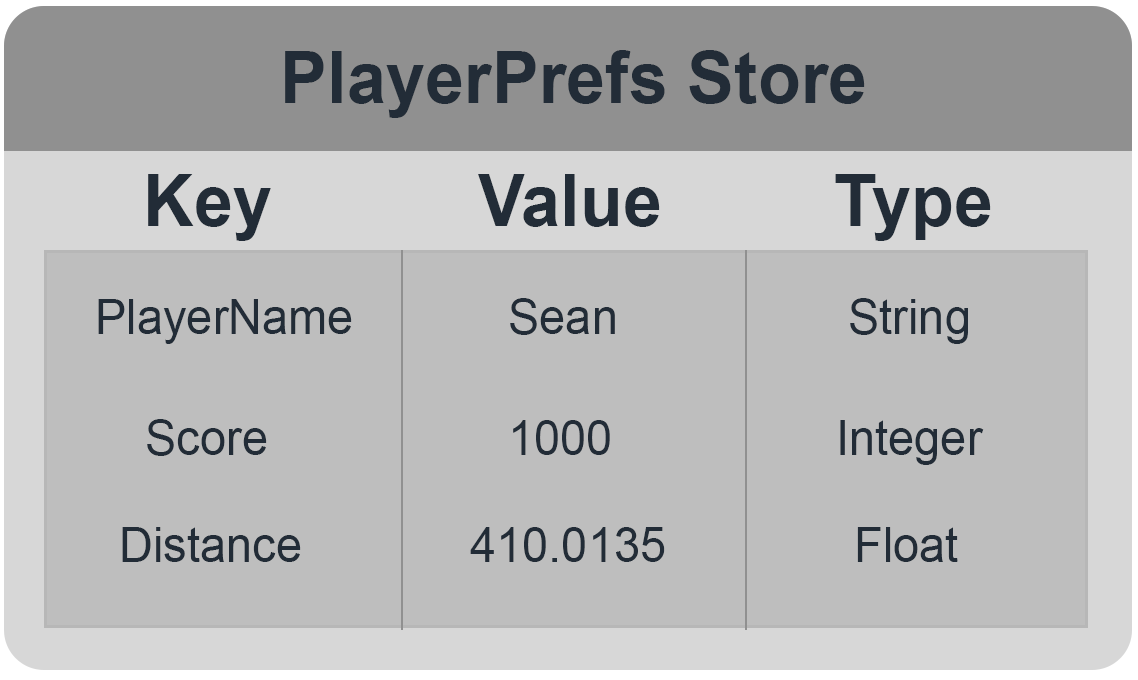
<style>
.page{position:relative;width:1138px;height:680px;background:#bebebe}
.page>*{position:absolute;margin:0}
.t1{font:72px "Arial-BoldMT";color:#222c37}
.t2{font:48px "ArialMT";color:#222c37}
</style>
<div class="page">
<p class="t1" style="left:285px;top:50px;width:580px;height:68px">PlayerPrefs Store</p>
<p class="t1" style="left:148px;top:174px;width:123px;height:67px">Key</p>
<p class="t1" style="left:478px;top:174px;width:182px;height:53px">Value</p>
<p class="t1" style="left:835px;top:174px;width:156px;height:67px">Type</p>
<p class="t2" style="left:98px;top:299px;width:254px;height:45px">PlayerName</p>
<p class="t2" style="left:510px;top:298px;width:105px;height:37px">Sean</p>
<p class="t2" style="left:850px;top:298px;width:118px;height:46px">String</p>
<p class="t2" style="left:147px;top:419px;width:120px;height:37px">Score</p>
<p class="t2" style="left:513px;top:420px;width:97px;height:35px">1000</p>
<p class="t2" style="left:840px;top:420px;width:144px;height:45px">Integer</p>
<p class="t2" style="left:122px;top:527px;width:179px;height:35px">Distance</p>
<p class="t2" style="left:470px;top:527px;width:195px;height:35px">410.0135</p>
<p class="t2" style="left:857px;top:527px;width:101px;height:35px">Float</p>
</div>
